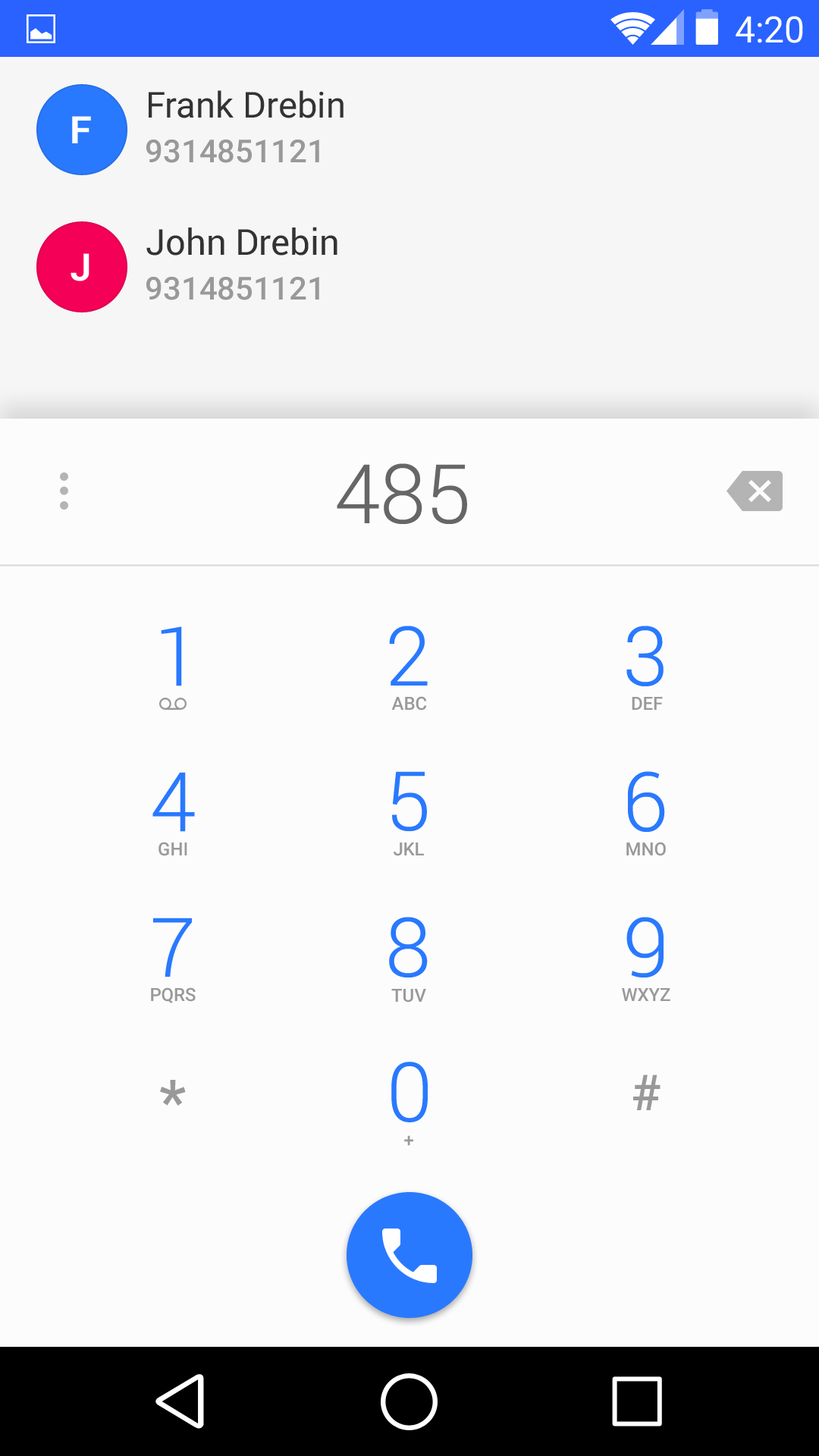
<style>
.page{position:relative;width:819px;height:1456px;background:#fcfcfc}
.page>*{position:absolute;margin:0}
.t1{font:36.4px "Roboto-Regular";color:#ffffff}
.t2{font:35.9px "Roboto-Regular";color:#333333}
.t3{font:37.9px "Roboto-Bold";color:#ffffff}
.t4{font:31.6px "Roboto-Medium";color:#999999}
.t5{font:82.4px "Roboto-Light";color:#666666}
.t6{font:82.4px "Roboto-Light";color:#2979ff}
.t7{font:18.2px "Roboto-Medium";color:#999999}
.t8{font:60.7px "Roboto-Medium";color:#999999}
.t9{font:49.5px "Roboto-Medium";color:#999999}
</style>
<div class="page">
<p class="t1" style="left:736px;top:16px;width:67px;height:27px">4:20</p>
<p class="t2" style="left:149px;top:90px;width:195px;height:28px">Frank Drebin</p>
<p class="t3" style="left:72px;top:116px;width:19px;height:27px">F</p>
<p class="t4" style="left:146px;top:140px;width:173px;height:23px">9314851121</p>
<p class="t2" style="left:146px;top:227px;width:191px;height:29px">John Drebin</p>
<p class="t3" style="left:71px;top:253px;width:18px;height:28px">J</p>
<p class="t4" style="left:146px;top:277px;width:173px;height:23px">9314851121</p>
<p class="t5" style="left:337px;top:463px;width:130px;height:61px">485</p>
<p class="t6" style="left:161px;top:626px;width:21px;height:60px">1</p>
<p class="t6" style="left:389px;top:626px;width:39px;height:60px">2</p>
<p class="t6" style="left:626px;top:626px;width:38px;height:60px">3</p>
<p class="t7" style="left:391px;top:696px;width:36px;height:15px">ABC</p>
<p class="t7" style="left:632px;top:697px;width:31px;height:13px">DEF</p>
<p class="t6" style="left:152px;top:772px;width:43px;height:60px">4</p>
<p class="t6" style="left:392px;top:771px;width:35px;height:61px">5</p>
<p class="t6" style="left:628px;top:771px;width:37px;height:61px">6</p>
<p class="t7" style="left:158px;top:842px;width:29px;height:14px">GHI</p>
<p class="t7" style="left:394px;top:842px;width:30px;height:14px">JKL</p>
<p class="t7" style="left:626px;top:842px;width:40px;height:14px">MNO</p>
<p class="t6" style="left:153px;top:918px;width:39px;height:59px">7</p>
<p class="t6" style="left:389px;top:917px;width:39px;height:60px">8</p>
<p class="t6" style="left:626px;top:917px;width:38px;height:60px">9</p>
<p class="t7" style="left:151px;top:987px;width:45px;height:16px">PQRS</p>
<p class="t7" style="left:391px;top:989px;width:35px;height:14px">TUV</p>
<p class="t7" style="left:622px;top:988px;width:48px;height:13px">WXYZ</p>
<p class="t6" style="left:391px;top:1062px;width:37px;height:60px">0</p>
<p class="t8" style="left:160px;top:1080px;width:26px;height:26px">*</p>
<p class="t9" style="left:633px;top:1075px;width:27px;height:35px">#</p>
<p class="t7" style="left:404px;top:1135px;width:9px;height:11px">+</p>
</div>
